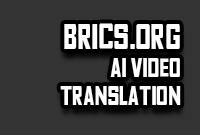
<style>
.page{position:relative;width:200px;height:135px;background:#333333}
.page>*{position:absolute;margin:0}
.t1{font:28.2px/27.7px "Fyodor-BoldCondensed";color:#fffefe}
.t2{font:37.1px/34.9px "Fyodor-BoldCondensed";color:#fffefe}
</style>
<div class="page">
<p class="t1" style="left:60px;top:23px;width:121px;height:82px;text-align:right"><span class="t2">BRICS.ORG<br></span>AI VIDEO<br>TRANSLATION</p>
</div>
